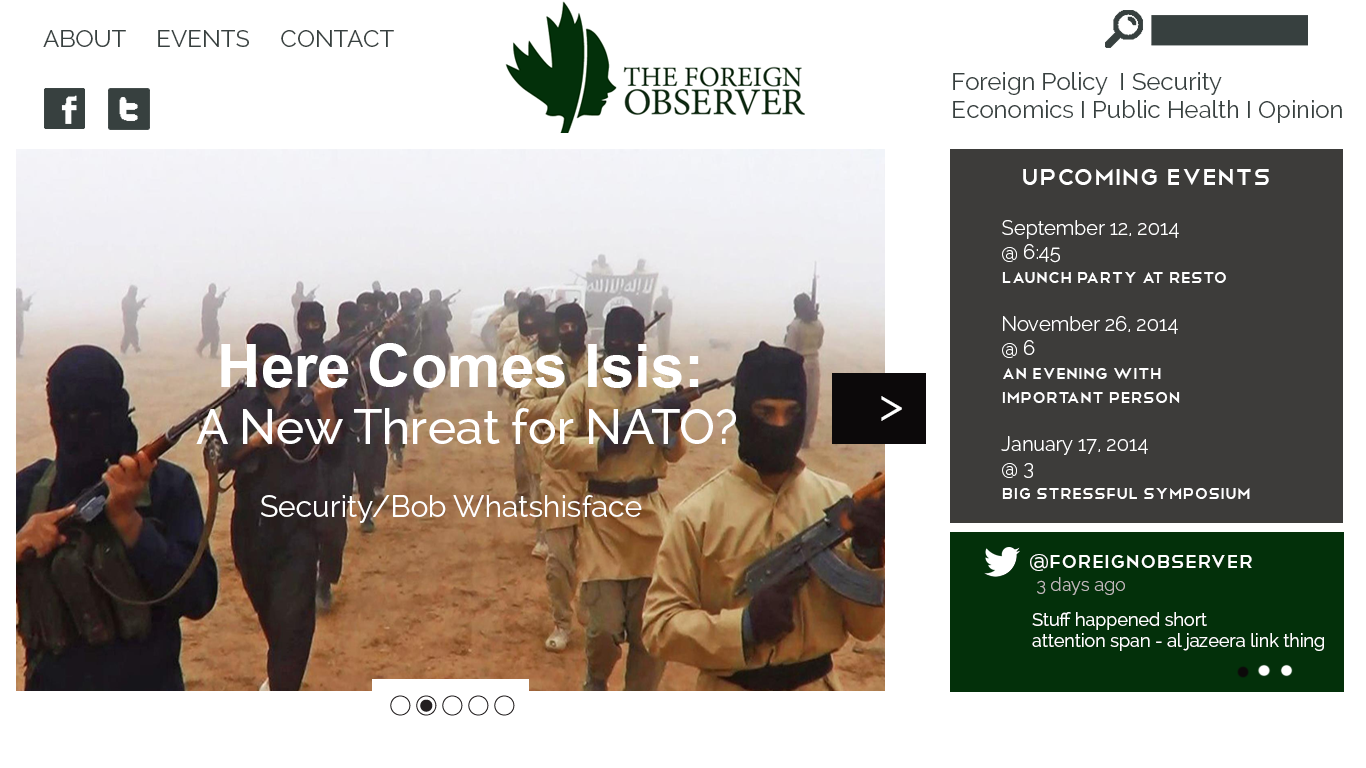
<style>
.page{position:relative;width:1366px;height:768px;background:#ffffff}
.page>*{position:absolute;margin:0}
.t1{font:24px "Raleway-Regular";color:#37403f}
.t2{font:30px "Telegrafico";color:#ffffff}
.t3{font:20px "Telegrafico";color:#ffffff}
.t4{font:20px "Raleway-Light";color:#ffffff}
.t5{font:48px "Raleway-Medium";color:#ffffff}
.t6{font:60px "Arial-BoldMT";color:#ffffff}
.t7{font:48px "Raleway-Regular";color:#ffffff}
.t8{font:30px "Raleway-Regular";color:#ffffff}
.t9{font:24px "Telegrafico";color:#ffffff}
.t10{font:24px "Raleway-SemiBold";color:#ffffff}
.t11{font:18px "Raleway-Light";color:#beb9b9}
.t12{font:18px "Raleway-Regular";color:#ffffff}
</style>
<div class="page">
<p class="t1" style="left:43px;top:30px;width:351px;height:17px">ABOUT     EVENTS     CONTACT</p>
<p class="t1" style="left:953px;top:72px;width:389px;height:51px">Foreign Policy  I Security <br>Economics I Public Health I Opinion</p>
<p class="t2" style="left:1023px;top:169px;width:246px;height:16px">upcoming Events</p>
<p class="t3" style="left:1001px;top:220px;width:249px;height:279px"><span class="t4">September 12, 2014<br>@ 6:45<br></span>Launch Party at Resto<br><span class="t4"><br>November 26, 2014<br>@ 6<br></span>An Evening with <br>Important Person<br><br><span class="t4">January 17, 2014<br>@ 3<br></span>Big Stressful Symposium</p>
<p class="t5" style="left:196px;top:343px;width:540px;height:101px;text-align:center"><span class="t6">Here Comes Isis: <br></span>A New Threat for NATO?</p>
<p class="t7" style="left:881px;top:396px;width:21px;height:25px">&gt;</p>
<p class="t8" style="left:261px;top:495px;width:381px;height:28px">Security/Bob Whatshisface</p>
<p class="t9" style="left:1030px;top:554px;width:222px;height:17px"><span class="t10">@</span>ForeignObserver</p>
<p class="t11" style="left:1037px;top:577px;width:88px;height:18px">3 days ago</p>
<p class="t12" style="left:1032px;top:612px;width:292px;height:39px">Stuff happened short <br>attention span - al jazeera link thing</p>
</div>
